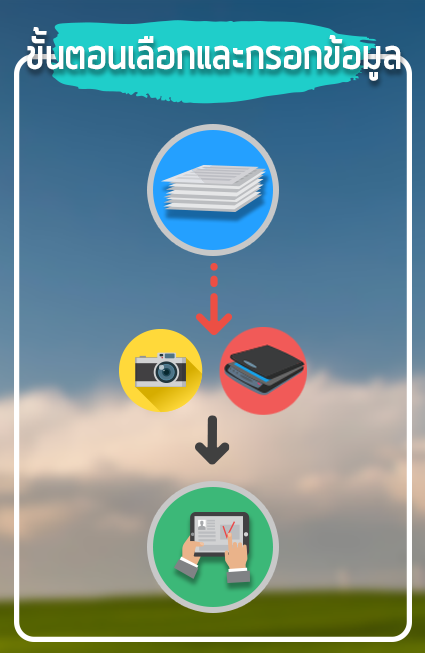
<style>
.page{position:relative;width:425px;height:653px}
.page>*{position:absolute;margin:0}
.t1{font:45.9px "Quark-Bold";letter-spacing:0.01em;color:#ffffff;scale:0.91 1}
</style>
<div class="page">
<p class="t1" style="left:27px;top:27px;width:374px;height:54px">ขั้นตอนเลิือกและกรอกข้อมูล</p>
</div>
